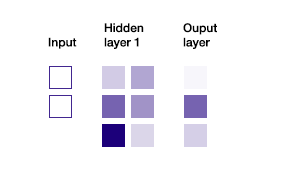
<style>
.page{position:relative;width:295px;height:180px;background:#ffffff}
.page>*{position:absolute;margin:0}
.t1{font:12px "HelveticaNeue-Medium";color:#000000}
</style>
<div class="page">
<p class="t1" style="left:104px;top:23px;width:40px;height:26px">Hidden<br>layer 1</p>
<p class="t1" style="left:183px;top:23px;width:34px;height:26px">Ouput<br>layer</p>
<p class="t1" style="left:48px;top:37px;width:29px;height:12px">Input</p>
</div>
